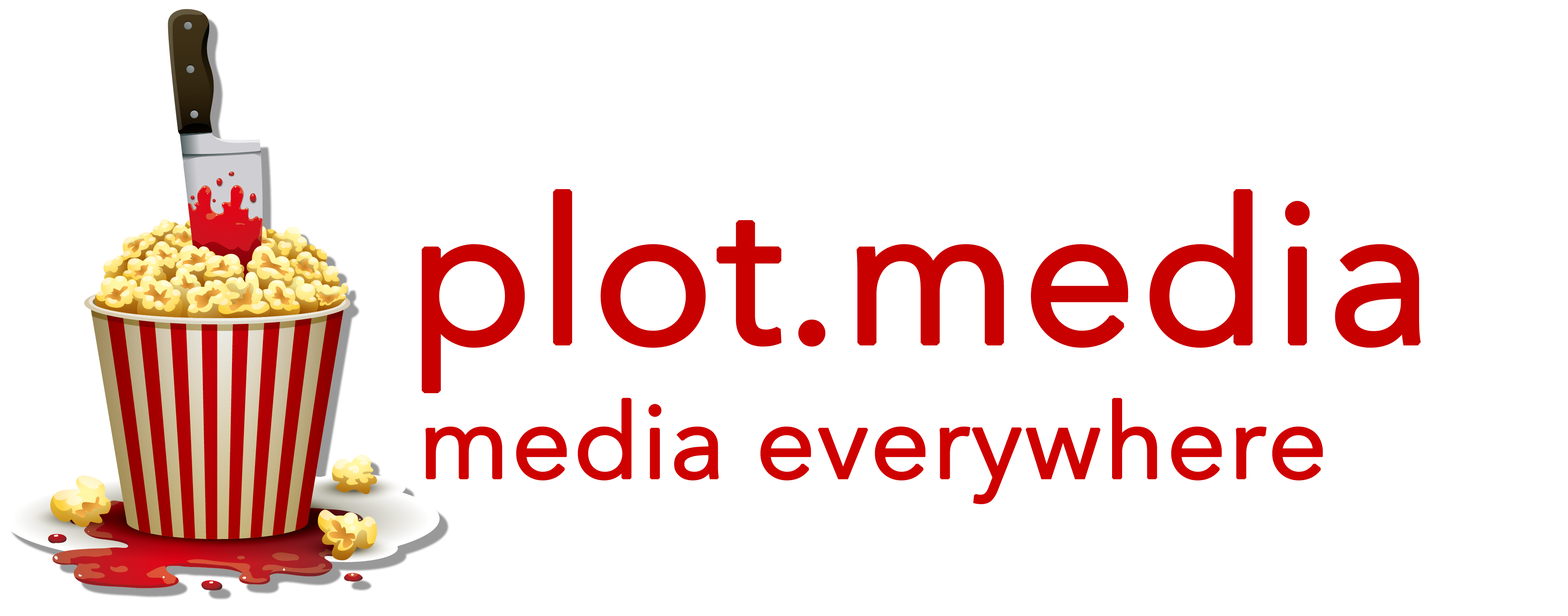
<style>
.page{position:relative;width:1568px;height:616px;background:#ffffff}
.page>*{position:absolute;margin:0}
.t1{font:199.4px "AvenirNext-Regular";letter-spacing:-0.005em;color:#c70000;font-weight:bold}
.t2{font:103.7px "AvenirNext-Regular";letter-spacing:-0.005em;color:#ce0000;font-weight:bold}
</style>
<div class="page">
<p class="t1" style="left:421px;top:189px;width:1000px;height:204px">plot.media</p>
<p class="t2" style="left:425px;top:398px;width:898px;height:106px">media everywhere</p>
</div>
